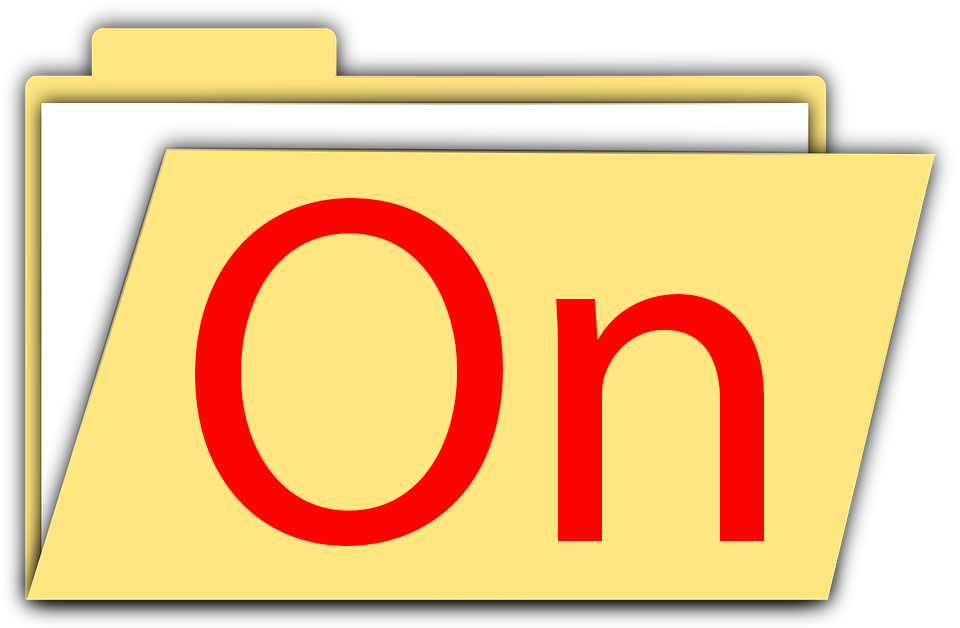
<style>
.page{position:relative;width:960px;height:628px;background:#ffe680}
.page>*{position:absolute;margin:0}
.t1{font:500px "MyriadPro-Regular";color:#fb0404}
</style>
<div class="page">
<p class="t1" style="left:195px;top:198px;width:569px;height:348px">On</p>
</div>
